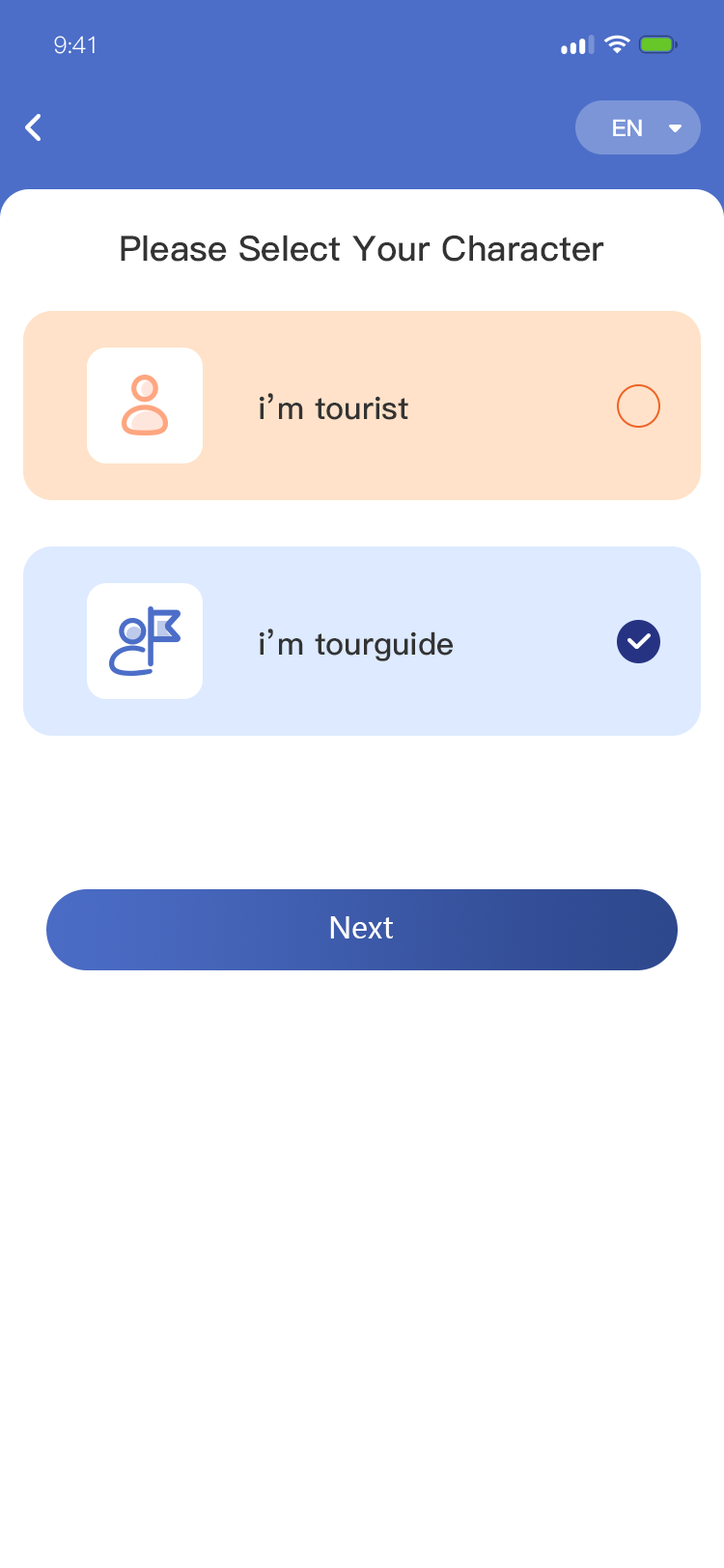
<style>
.page{position:relative;width:724px;height:1568px;background:#ffffff}
.page>*{position:absolute;margin:0}
.t1{font:23.2px "PingFang-SC-Regular";letter-spacing:-0.025em;color:#ffffff}
.t2{font:23.2px "PingFang-SC-Bold";color:#ffffff}
.t3{font:34.8px "PingFang-SC-Bold";color:#333333}
.t4{font:34.8px "PingFang-SC-Bold";color:#333333;text-transform:uppercase}
.t5{font:30.9px "PingFang-SC-Bold";color:#333333}
.t6{font:29px "MicrosoftYaHei";color:#ffffff}
</style>
<div class="page">
<p class="t1" style="left:54px;top:36px;width:41px;height:18px">9:41</p>
<p class="t2" style="left:613px;top:119px;width:29px;height:17px">EN</p>
<p class="t3" style="left:121px;top:235px;width:483px;height:27px"><span class="t4">p</span>lease <span class="t4">s</span>elect <span class="t4">y</span>our <span class="t4">c</span>haracter</p>
<p class="t5" style="left:260px;top:393px;width:148px;height:27px">i’m tourist</p>
<p class="t5" style="left:260px;top:629px;width:193px;height:32px">i’m tourguide</p>
<p class="t6" style="left:330px;top:916px;width:63px;height:22px">Next</p>
</div>
